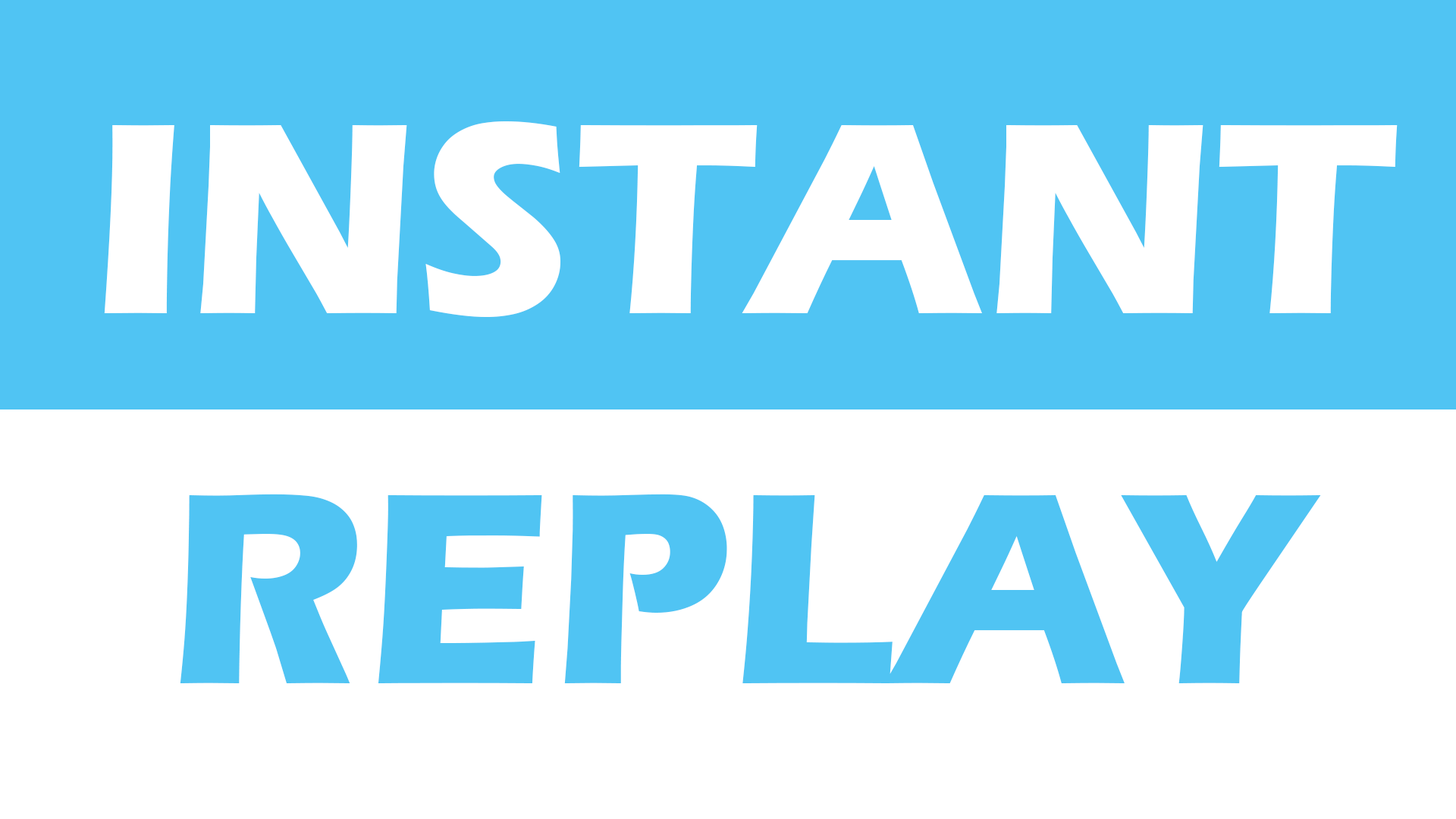
<style>
.page{position:relative;width:1456px;height:819px;background:#ffffff}
.page>*{position:absolute;margin:0}
.t1{font:282.1px "ErasITC-Bold";color:#ffffff}
.t2{font:282.1px "ErasITC-Bold";color:#50c4f3}
</style>
<div class="page">
<p class="t1" style="left:104px;top:121px;width:1294px;height:196px">INSTANT</p>
<p class="t2" style="left:180px;top:494px;width:1141px;height:189px">REPLAY</p>
</div>
